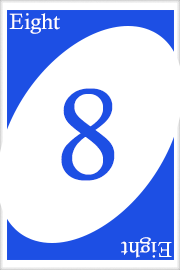
<style>
.page{position:relative;width:180px;height:270px;background:#ffffff}
.page>*{position:absolute;margin:0}
.t1{font:22px "CalistoMT";color:#ffffff}
.t2{font:128px "CalistoMT";color:#1d4fe4}
.t3{font:21.7px "CalistoMT";color:#ffffff}
</style>
<div class="page">
<p class="t1" style="left:9px;top:13px;width:51px;height:21px">Eight</p>
<p class="t2" style="left:61px;top:88px;width:54px;height:93px">8</p>
<p class="t3" style="left:121px;top:237px;width:51px;height:21px;rotate:180deg">Eight</p>
</div>
